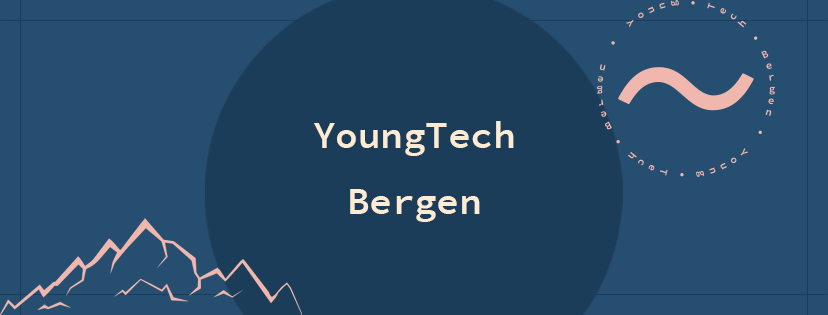
<style>
.page{position:relative;width:828px;height:315px;background:#264e70}
.page>*{position:absolute;margin:0}
.t1{font:37.5px/66.7px "SourceCodePro-Semibold";color:#fdebd3}
</style>
<div class="page">
<p class="t1" style="left:314px;top:121px;width:200px;height:101px;text-align:center">YoungTech<br>Bergen</p>
</div>
